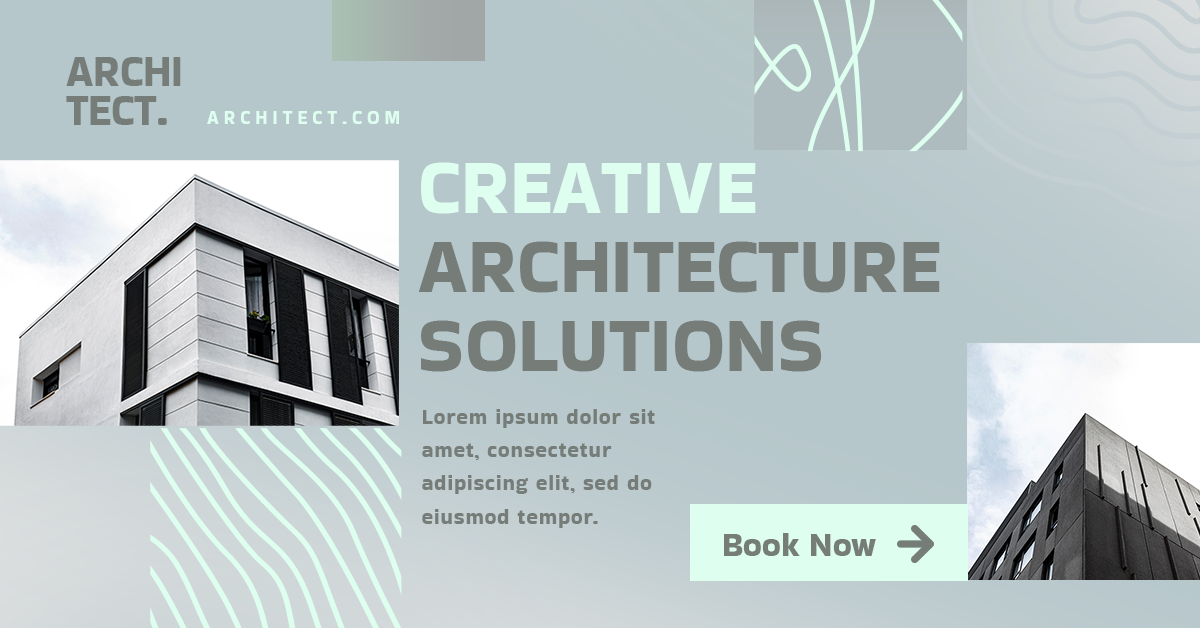
<style>
.page{position:relative;width:1200px;height:628px;background:#b6c7cb}
.page>*{position:absolute;margin:0}
.t1{font:45.2px/38.8px "BakbakOne-Regular";color:#767d79;text-transform:uppercase;scale:0.92 1}
.t2{font:19px "BakbakOne-Regular";letter-spacing:0.3em;color:#deffef;text-transform:uppercase;scale:0.92 1}
.t3{font:79.1px/79.1px "BakbakOne-Regular";color:#767d79;text-transform:uppercase;scale:0.96 1}
.t4{font:79.1px/79.1px "BakbakOne-Regular";color:#deffef;text-transform:uppercase;scale:0.96 1}
.t5{font:20.8px/33.3px "BakbakOne-Regular";letter-spacing:0.05em;color:#767d79}
.t6{font:34px "BakbakOne-Regular";color:#767d79}
</style>
<div class="page">
<p class="t1" style="left:66px;top:57px;width:115px;height:68px">archi<br>Tect.</p>
<p class="t2" style="left:207px;top:111px;width:192px;height:13px">architect.com</p>
<p class="t3" style="left:418px;top:162px;width:522px;height:210px"><span class="t4">Creative<br></span>architecture<br>solutions</p>
<p class="t5" style="left:422px;top:409px;width:233px;height:119px">Lorem ipsum dolor sit amet, consectetur adipiscing elit, sed do eiusmod tempor.</p>
<p class="t6" style="left:724px;top:533px;width:152px;height:23px">Book Now</p>
</div>
